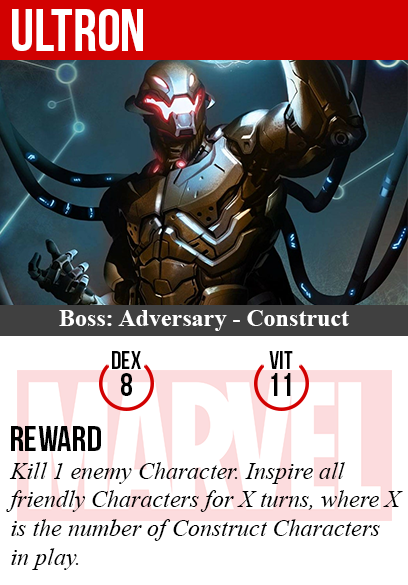
<style>
.page{position:relative;width:408px;height:585px;background:#ffffff}
.page>*{position:absolute;margin:0}
.t1{font:60px "BebasNeue";color:#ffffff}
.t2{font:24px "TimesNewRomanPS-BoldMT";color:#ffffff}
.t3{font:25px "BebasNeue";color:#000000}
.t4{font:32px "BebasNeue";color:#000000}
.t5{font:36px "BebasNeue";color:#000000}
.t6{font:24px "TimesNewRomanPS-ItalicMT";color:#000000}
</style>
<div class="page">
<p class="t1" style="left:12px;top:9px;width:131px;height:42px">ultron</p>
<p class="t2" style="left:59px;top:310px;width:290px;height:21px">Boss: Adversary - Construct</p>
<p class="t3" style="left:112px;top:351px;width:29px;height:18px">dex</p>
<p class="t3" style="left:269px;top:351px;width:24px;height:18px">vit</p>
<p class="t4" style="left:121px;top:373px;width:11px;height:23px">8</p>
<p class="t4" style="left:271px;top:373px;width:20px;height:23px">11</p>
<p class="t5" style="left:11px;top:426px;width:90px;height:25px">reward</p>
<p class="t6" style="left:6px;top:462px;width:397px;height:108px">Kill 1 enemy Character. Inspire all<br>friendly Characters for X turns, where X<br>is the number of Construct Characters<br>in play.</p>
</div>
